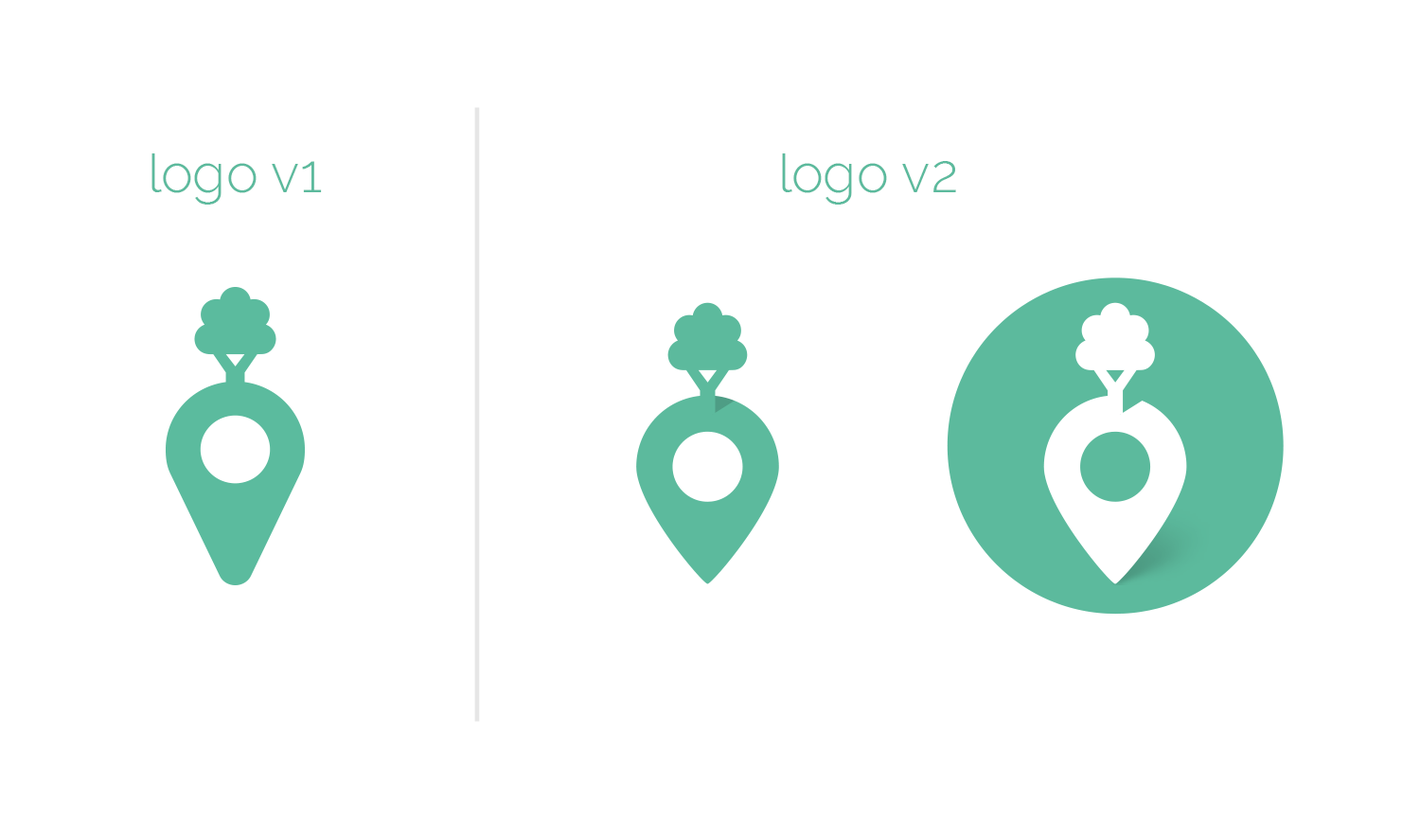
<style>
.page{position:relative;width:1420px;height:840px;background:#ffffff}
.page>*{position:absolute;margin:0}
.t1{font:53.7px "Raleway-Light";color:#5cba9d}
</style>
<div class="page">
<p class="t1" style="left:151px;top:153px;width:171px;height:51px">logo v1</p>
<p class="t1" style="left:782px;top:153px;width:174px;height:51px">logo v2</p>
</div>
